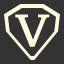
<style>
.page{position:relative;width:64px;height:64px;background:#333333}
.page>*{position:absolute;margin:0}
.t1{font:46.3px "BookmanOldStyle";color:#fff8dc;font-weight:bold}
</style>
<div class="page">
<p class="t1" style="left:15px;top:14px;width:35px;height:33px">V</p>
</div>
